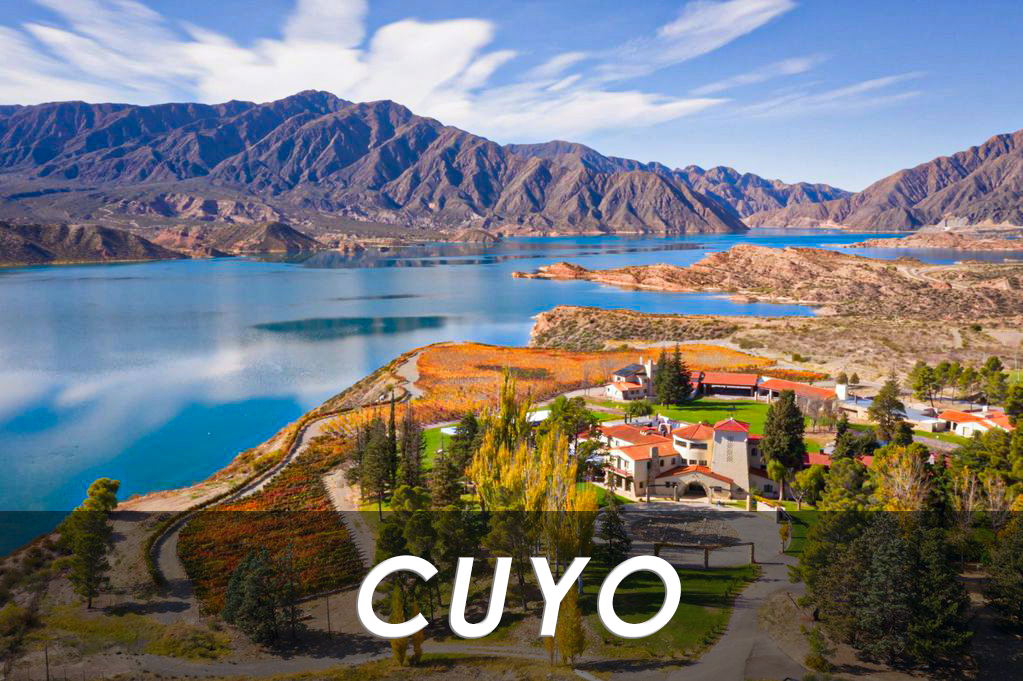
<style>
.page{position:relative;width:1023px;height:681px}
.page>*{position:absolute;margin:0}
.t1{font:110px "CenturyGothic-Bold";letter-spacing:0.05em;color:#ffffff;font-style:italic}
</style>
<div class="page">
<p class="t1" style="left:356px;top:555px;width:325px;height:84px">CUYO</p>
</div>
